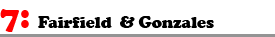
<style>
.page{position:relative;width:275px;height:37px;background:#ffffff}
.page>*{position:absolute;margin:0}
.t1{font:16.7px "CooperBlack";color:#000000}
.t2{font:33.3px "CooperBlack";color:#ff0000}
</style>
<div class="page">
<p class="t1" style="left:0px;top:9px;width:214px;height:23px"><span class="t2">7: </span>Fairfield  &amp; Gonzales</p>
</div>
